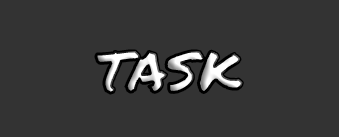
<style>
.page{position:relative;width:339px;height:137px;background:#333333}
.page>*{position:absolute;margin:0}
.t1{font:56px "PermanentMarker-Regular"}
</style>
<div class="page">
<p class="t1" style="left:96px;top:51px;width:147px;height:42px">TASK</p>
</div>
